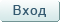
<style>
.page{position:relative;width:60px;height:22px}
.page>*{position:absolute;margin:0}
.t1{font:13px "ArialMT";letter-spacing:0.099em;color:#345a70}
</style>
<div class="page">
<p class="t1" style="left:13px;top:5px;width:33px;height:12px">Вход</p>
</div>
